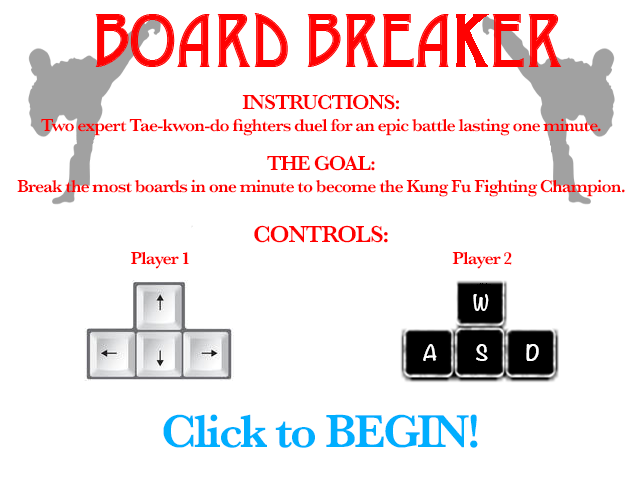
<style>
.page{position:relative;width:640px;height:480px;background:#ffffff}
.page>*{position:absolute;margin:0}
.t1{font:18px "Baskerville-SemiBold";letter-spacing:-0.05em;color:#ff0000}
.t2{font:21px "Baskerville-SemiBold";letter-spacing:-0.05em;color:#ff0000}
.t3{font:24px "Baskerville-SemiBold";letter-spacing:-0.05em;color:#ff0000}
.t4{font:48px "Baskerville-SemiBold";letter-spacing:-0.05em;color:#00aeff}
</style>
<div class="page">
<p class="t1" style="left:17px;top:94px;width:608px;height:354px;text-align:center"><span class="t2">INSTRUCTIONS:<br></span>Two expert Tae-kwon-do fighters duel for an epic battle lasting one minute.<br><br><span class="t2">THE GOAL:<br></span>Break the most boards in one minute to become the Kung Fu Fighting Champion.<br><br><span class="t3">CONTROLS:<br></span>Player 1                                                                         Player 2<br><br><br><br><br><br><span class="t4">Click to BEGIN!</span></p>
</div>
